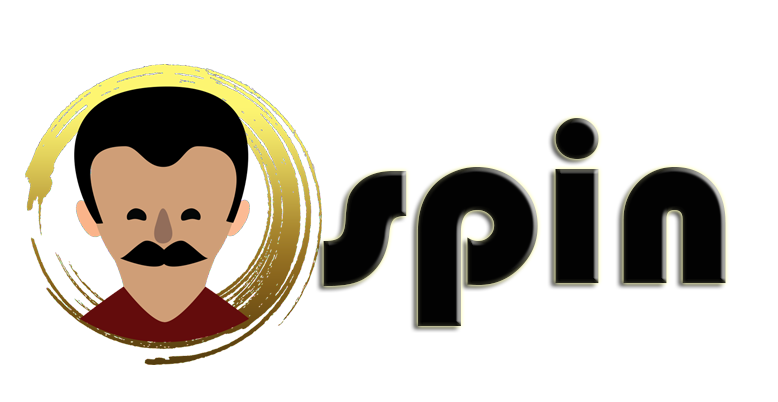
<style>
.page{position:relative;width:778px;height:402px;background:#ffffff}
.page>*{position:absolute;margin:0}
.t1{font:234.4px "Bauhaus93";color:#020202}
</style>
<div class="page">
<p class="t1" style="left:323px;top:117px;width:403px;height:209px">spin</p>
</div>
